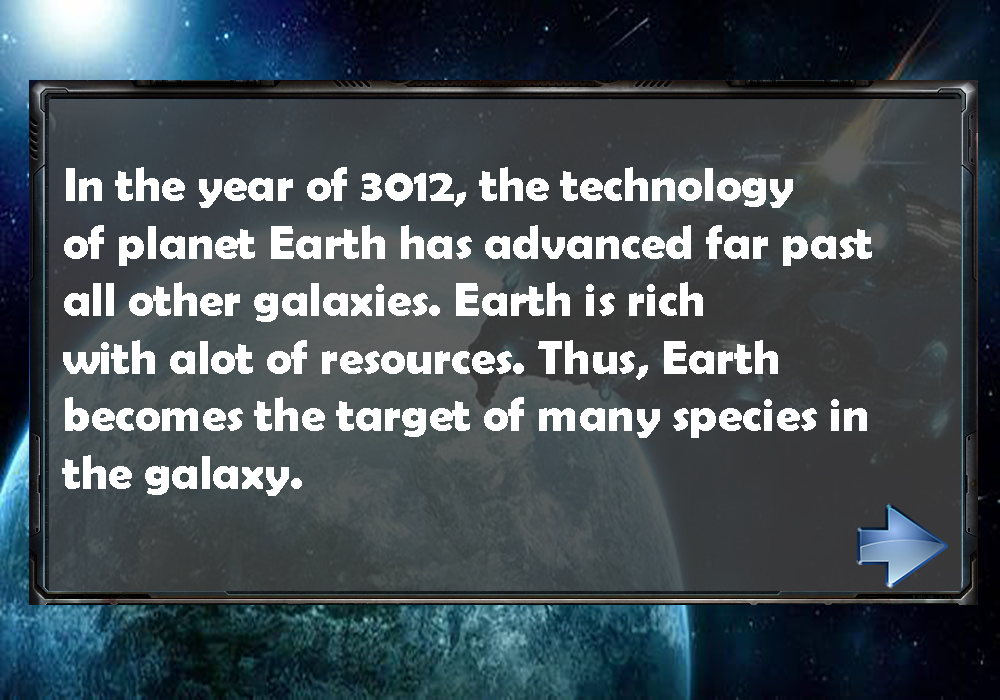
<style>
.page{position:relative;width:1000px;height:700px}
.page>*{position:absolute;margin:0}
.t1{font:48px "BerlinSansFBDemi-Bold";color:#ffffff}
</style>
<div class="page">
<p class="t1" style="left:62px;top:167px;width:810px;height:329px">In the year of 3012, the technology<br>of planet Earth has advanced far past <br>all other galaxies. Earth is rich <br>with alot of resources. Thus, Earth <br>becomes the target of many species in <br>the galaxy.</p>
</div>
